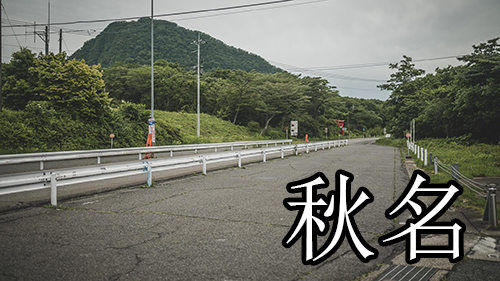
<style>
.page{position:relative;width:500px;height:281px}
.page>*{position:absolute;margin:0}
.t1{font:96px "SimSun";color:#ffffff}
</style>
<div class="page">
<p class="t1" style="left:286px;top:174px;width:176px;height:87px">秋名</p>
</div>
